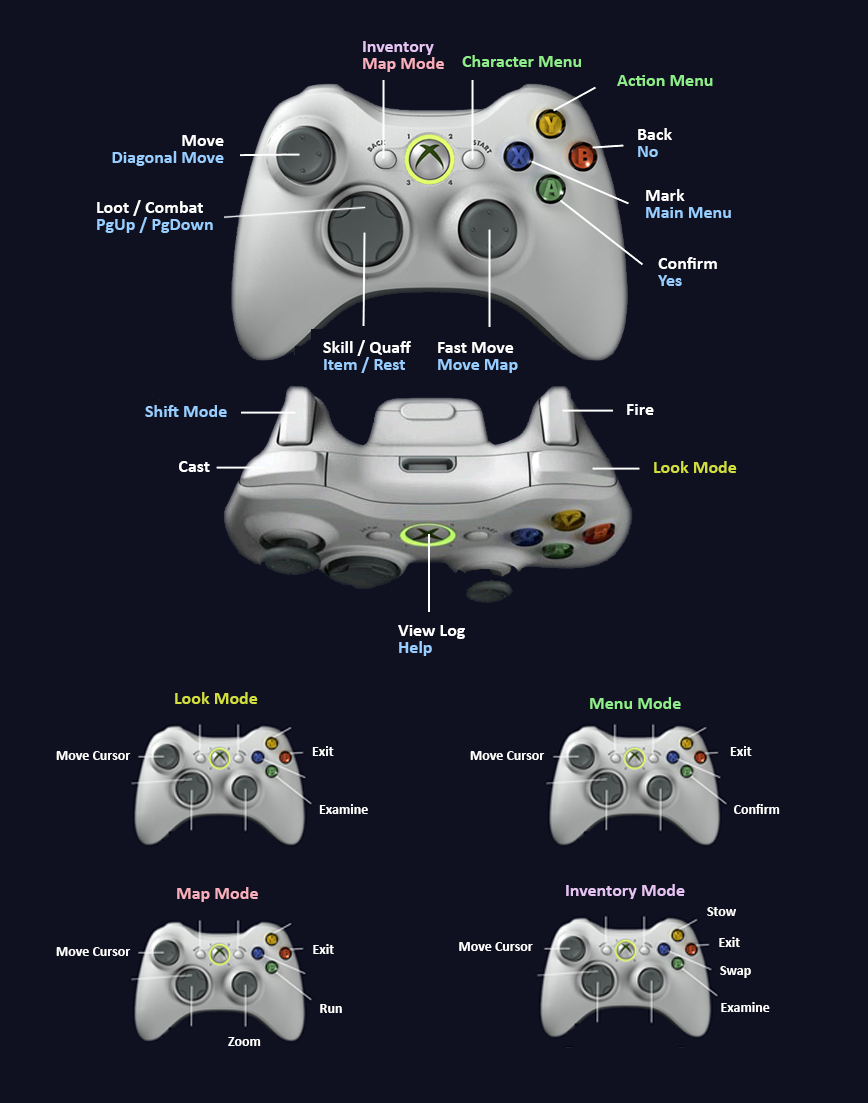
<style>
.page{position:relative;width:868px;height:1103px;background:#0f1120}
.page>*{position:absolute;margin:0}
.t1{font:18px/17px "Calibri-Bold";color:#e5c3f2}
.t2{font:18px/17px "Calibri-Bold";color:#f8afbb}
.t3{font:18px "Calibri-Bold";color:#8fed89}
.t4{font:18px/17px "Calibri-Bold";color:#98cdff}
.t5{font:18px/17px "Calibri-Bold";color:#ffffff}
.t6{font:18px "Calibri-Bold";color:#98cdff}
.t7{font:18px "Calibri-Bold";color:#ffffff}
.t8{font:18px "Calibri-Bold";color:#d1de3d}
.t9{font:14px "Calibri-Bold";color:#ffffff}
.t10{font:18px "Calibri-Bold";color:#f8afbb}
.t11{font:18px "Calibri-Bold";color:#e5c3f2}
</style>
<div class="page">
<p class="t1" style="left:363px;top:41px;width:81px;height:31px">Inventory<br><span class="t2">Map Mode</span></p>
<p class="t3" style="left:462px;top:55px;width:119px;height:12px">Character Menu</p>
<p class="t3" style="left:617px;top:75px;width:96px;height:11px">Action Menu</p>
<p class="t4" style="left:112px;top:135px;width:112px;height:31px;text-align:right"><span class="t5">Move<br></span>Diagonal Move</p>
<p class="t5" style="left:638px;top:128px;width:34px;height:29px">Back<br><span class="t4">No</span></p>
<p class="t4" style="left:646px;top:189px;width:85px;height:29px"><span class="t5">Mark<br></span>Main Menu</p>
<p class="t5" style="left:97px;top:200px;width:116px;height:33px">Loot / Combat<br><span class="t4">PgUp / PgDown</span></p>
<p class="t5" style="left:658px;top:257px;width:59px;height:29px">Confirm<br><span class="t4">Yes</span></p>
<p class="t5" style="left:323px;top:340px;width:88px;height:33px">Skill / Quaff<br><span class="t4">Item / Rest</span></p>
<p class="t5" style="left:438px;top:342px;width:80px;height:31px">Fast Move<br><span class="t4">Move Map</span></p>
<p class="t6" style="left:145px;top:405px;width:82px;height:12px"><span class="t7"><br></span>Shift Mode</p>
<p class="t7" style="left:627px;top:404px;width:27px;height:11px">Fire</p>
<p class="t7" style="left:179px;top:461px;width:31px;height:11px">Cast</p>
<p class="t8" style="left:654px;top:461px;width:83px;height:12px">Look Mode</p>
<p class="t5" style="left:398px;top:625px;width:67px;height:31px">View Log<br><span class="t4">Help</span></p>
<p class="t8" style="left:175px;top:692px;width:83px;height:12px">Look Mode</p>
<p class="t3" style="left:590px;top:697px;width:91px;height:12px">Menu Mode</p>
<p class="t9" style="left:312px;top:746px;width:22px;height:10px">Exit</p>
<p class="t9" style="left:730px;top:746px;width:22px;height:10px">Exit</p>
<p class="t9" style="left:56px;top:751px;width:75px;height:9px">Move Cursor</p>
<p class="t9" style="left:470px;top:751px;width:75px;height:9px">Move Cursor</p>
<p class="t9" style="left:319px;top:804px;width:49px;height:10px">Examine</p>
<p class="t9" style="left:734px;top:804px;width:46px;height:10px">Confirm</p>
<p class="t10" style="left:177px;top:887px;width:81px;height:15px">Map Mode</p>
<p class="t11" style="left:566px;top:884px;width:119px;height:15px">Inventory Mode</p>
<p class="t9" style="left:707px;top:907px;width:29px;height:9px">Stow</p>
<p class="t9" style="left:459px;top:942px;width:74px;height:9px">Move Cursor</p>
<p class="t9" style="left:719px;top:937px;width:21px;height:10px">Exit</p>
<p class="t9" style="left:56px;top:947px;width:75px;height:9px">Move Cursor</p>
<p class="t9" style="left:313px;top:944px;width:21px;height:10px">Exit</p>
<p class="t9" style="left:720px;top:966px;width:31px;height:12px">Swap</p>
<p class="t9" style="left:320px;top:1004px;width:22px;height:9px">Run</p>
<p class="t9" style="left:721px;top:1002px;width:49px;height:10px">Examine</p>
<p class="t9" style="left:228px;top:1037px;width:33px;height:9px">Zoom</p>
</div>
